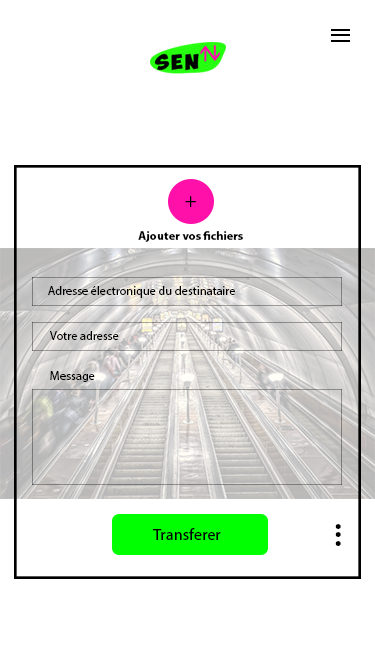
<style>
.page{position:relative;width:375px;height:667px;background:#ffffff}
.page>*{position:absolute;margin:0}
.t1{font:20.5px "MyriadPro-Regular";color:#000000}
.t2{font:12.3px "MyriadPro-Bold";color:#000000}
.t3{font:12.3px "MyriadPro-Regular";color:#000000}
.t4{font:16.4px "MyriadPro-Regular";color:#000000}
.t5{font:41px "MyriadPro-Regular";color:#000000}
</style>
<div class="page">
<p class="t1" style="left:185px;top:196px;width:11px;height:11px">+</p>
<p class="t2" style="left:138px;top:231px;width:105px;height:11px">Ajouter vos fichiers</p>
<p class="t3" style="left:48px;top:286px;width:187px;height:12px">Adresse électronique du destinataire</p>
<p class="t3" style="left:50px;top:331px;width:69px;height:9px">Votre adresse</p>
<p class="t3" style="left:50px;top:371px;width:45px;height:11px">Message</p>
<p class="t4" style="left:152px;top:528px;width:69px;height:12px">Transferer</p>
<p class="t5" style="left:335px;top:524px;width:6px;height:22px;rotate:89deg">...</p>
</div>
